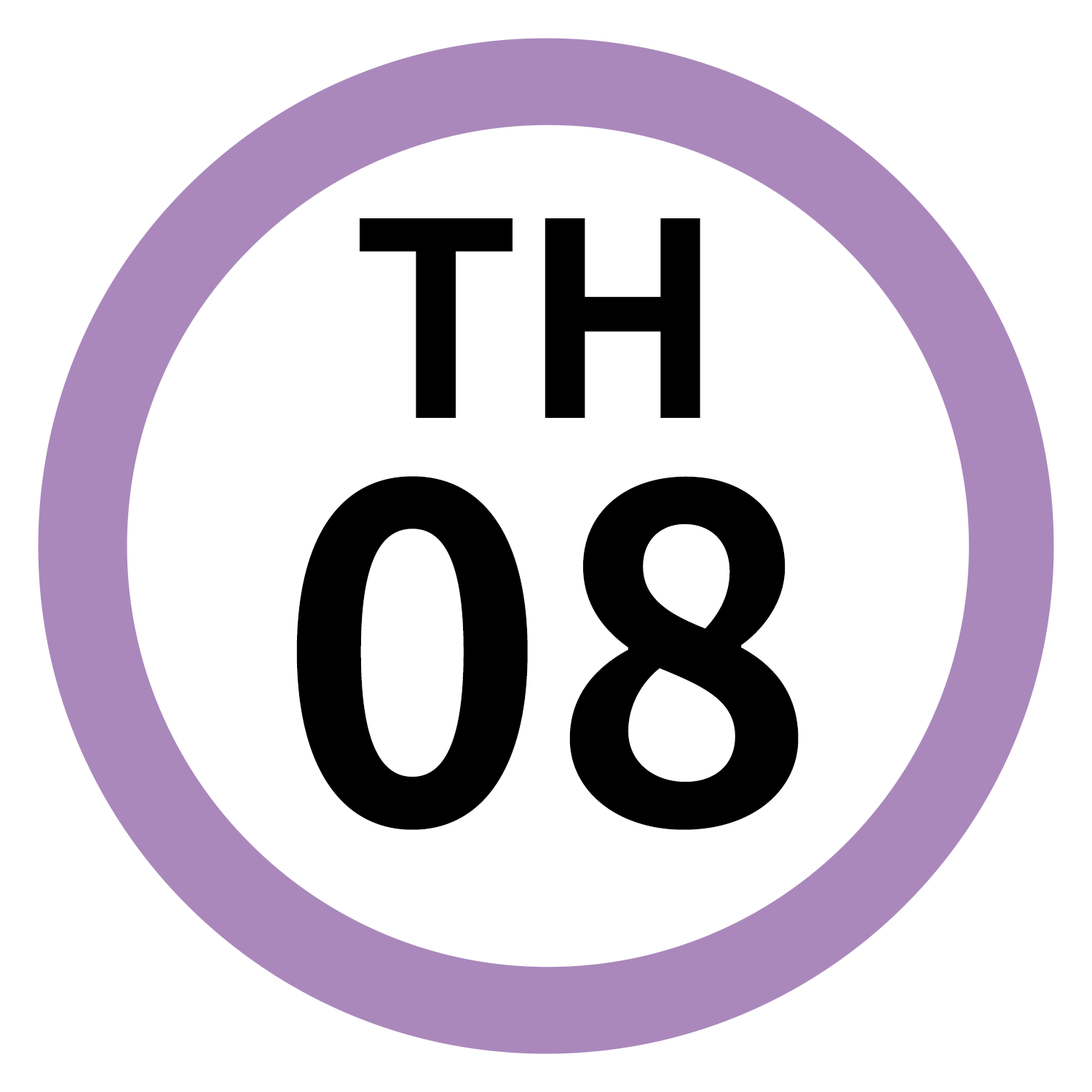
<style>
.page{position:relative;width:1092px;height:1092px;background:#ffffff}
.page>*{position:absolute;margin:0}
.t1{font:269.8px "NotoSansJP-Bold";color:#000000}
.t2{font:460.5px "NotoSansJP-Bold";color:#000000}
</style>
<div class="page">
<p class="t1" style="left:360px;top:218px;width:340px;height:200px">TH</p>
<p class="t2" style="left:296px;top:476px;width:503px;height:354px">08</p>
</div>
